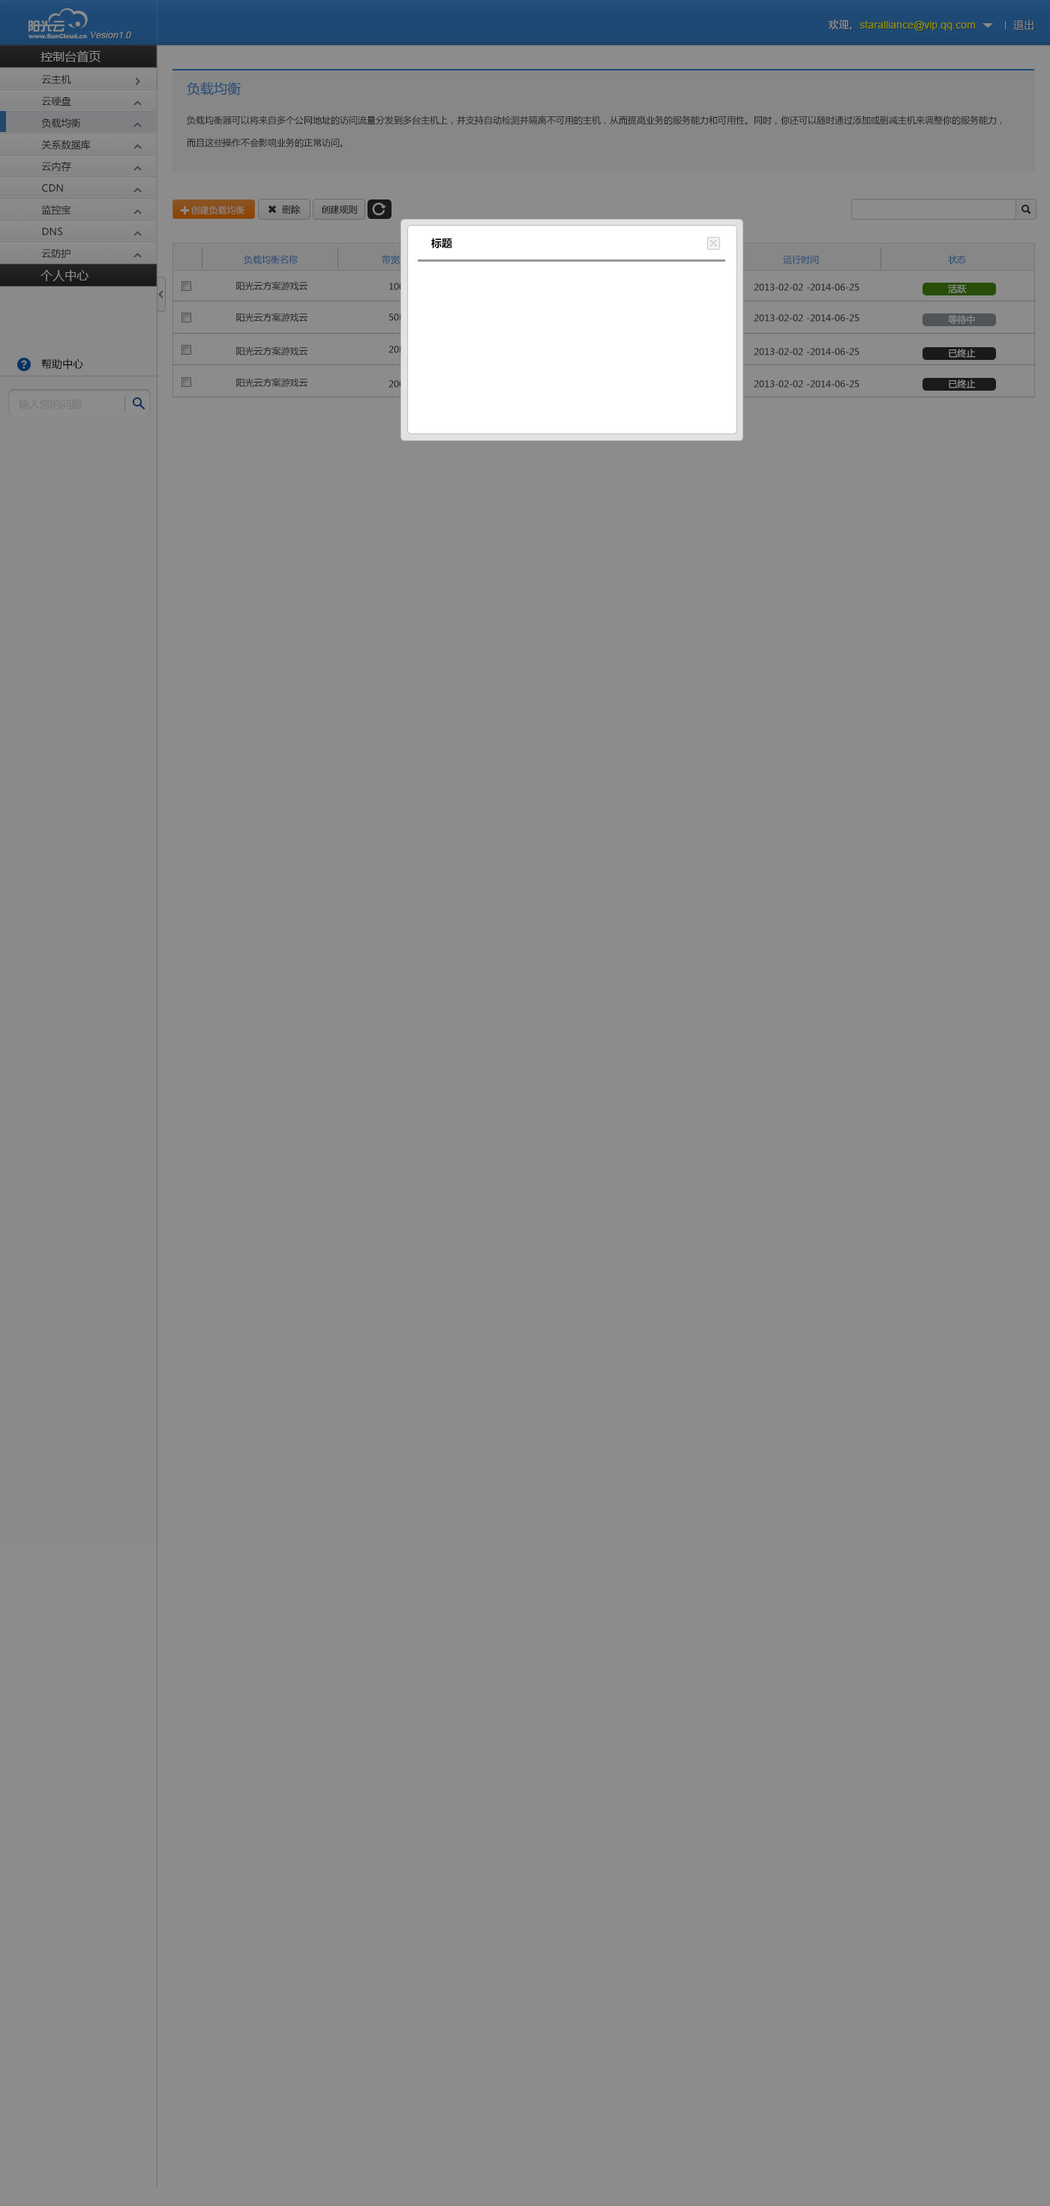
<style>
.page{position:relative;width:1050px;height:2206px;background:#8c8c8c}
.page>*{position:absolute;margin:0}
.t1{font:10.5px "ArialMT";color:#8a8c08}
.t2{font:10.5px "AdobeHeitiStd-Regular";color:#8a8c08}
.t3{font:10.5px "MicrosoftYaHei";color:#8c8c8c}
.t4{font:9px "ArialMT";color:#8c8c8c;font-style:italic}
.t5{font:12px "MicrosoftYaHei";color:#8c8c8c}
.t6{font:9.8px "MicrosoftYaHei";color:#333333}
.t7{font:13.5px "MicrosoftYaHei";color:#1e4974}
.t8{font:9px/22.5px "MicrosoftYaHei";color:#333333}
.t9{font:9px "MicrosoftYaHei";color:#8b8b8b}
.t10{font:9px "MicrosoftYaHei";color:#000000}
.t11{font:10.5px "MicrosoftYaHei-Bold";color:#000000}
.t12{font:9px "MicrosoftYaHei";color:#333333}
.t13{font:9px "MicrosoftYaHei";color:#8c8c8c}
.t14{font:9px "MicrosoftYaHei";color:#1c1c1c}
.t15{font:10.5px "MicrosoftYaHei";color:#000000}
.t16{font:10.5px "MicrosoftYaHei";color:#767676}
</style>
<div class="page">
<p class="t1" style="left:829px;top:20px;width:147px;height:11px"><span class="t2">欢迎，</span>staralliance@vip.qq.com</p>
<p class="t3" style="left:1013px;top:20px;width:21px;height:10px">退出</p>
<p class="t4" style="left:91px;top:32px;width:40px;height:6px">Vesion1.0</p>
<p class="t5" style="left:40px;top:50px;width:60px;height:13px">控制台首页</p>
<p class="t6" style="left:41px;top:74px;width:30px;height:11px">云主机</p>
<p class="t7" style="left:187px;top:82px;width:54px;height:13px">负载均衡</p>
<p class="t6" style="left:41px;top:96px;width:30px;height:10px">云硬盘</p>
<p class="t6" style="left:41px;top:118px;width:39px;height:10px">负载均衡</p>
<p class="t8" style="left:187px;top:116px;width:815px;height:32px">负载均衡器可以将来自多个公网地址的访问流量分发到多台主机上，并支持自动检测并隔离不可用的主机，从而提高业务的服务能力和可用性。同时，你还可以随时通过添加或删减主机来调整你的服务能力，而且这些操作不会影响业务的正常访问。</p>
<p class="t6" style="left:41px;top:140px;width:50px;height:10px">关系数据库</p>
<p class="t6" style="left:41px;top:161px;width:30px;height:11px">云内存</p>
<p class="t6" style="left:42px;top:184px;width:21px;height:8px">CDN</p>
<p class="t6" style="left:41px;top:205px;width:30px;height:9px">监控宝</p>
<p class="t9" style="left:190px;top:206px;width:55px;height:9px">创建负载均衡</p>
<p class="t10" style="left:282px;top:205px;width:19px;height:9px">删除</p>
<p class="t10" style="left:321px;top:205px;width:36px;height:9px">创建规则</p>
<p class="t6" style="left:42px;top:227px;width:21px;height:9px">DNS</p>
<p class="t11" style="left:431px;top:238px;width:21px;height:10px">标题</p>
<p class="t6" style="left:41px;top:248px;width:29px;height:11px">云防护</p>
<p class="t5" style="left:40px;top:270px;width:48px;height:11px">个人中心</p>
<p class="t12" style="left:236px;top:281px;width:72px;height:10px">阳光云方案游戏云</p>
<p class="t12" style="left:754px;top:284px;width:106px;height:7px">2013-02-02 -2014-06-25</p>
<p class="t13" style="left:948px;top:284px;width:19px;height:10px">活跃</p>
<p class="t12" style="left:236px;top:313px;width:72px;height:9px">阳光云方案游戏云</p>
<p class="t12" style="left:389px;top:314px;width:18px;height:7px">50M</p>
<p class="t12" style="left:754px;top:314px;width:106px;height:8px">2013-02-02 -2014-06-25</p>
<p class="t13" style="left:948px;top:315px;width:27px;height:10px">等待中</p>
<p class="t12" style="left:236px;top:346px;width:72px;height:10px">阳光云方案游戏云</p>
<p class="t14" style="left:388px;top:346px;width:19px;height:7px">20M</p>
<p class="t12" style="left:754px;top:348px;width:106px;height:8px">2013-02-02 -2014-06-25</p>
<p class="t13" style="left:949px;top:349px;width:27px;height:9px">已终止</p>
<p class="t15" style="left:41px;top:358px;width:42px;height:12px">帮助中心</p>
<p class="t12" style="left:236px;top:378px;width:72px;height:10px">阳光云方案游戏云</p>
<p class="t12" style="left:754px;top:380px;width:106px;height:8px">2013-02-02 -2014-06-25</p>
<p class="t13" style="left:949px;top:380px;width:27px;height:8px">已终止</p>
<p class="t16" style="left:19px;top:399px;width:63px;height:11px">输入您的问题</p>
</div>
